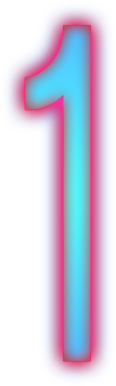
<style>
.page{position:relative;width:116px;height:386px;background:#ffffff}
.page>*{position:absolute;margin:0}
.t1{font:481.8px "Lastwaerkregular";letter-spacing:0.025em;scale:0.76 1}
</style>
<div class="page">
<p class="t1" style="left:25px;top:25px;width:66px;height:336px">1</p>
<p class="t1" style="left:25px;top:25px;width:66px;height:336px">1</p>
</div>
